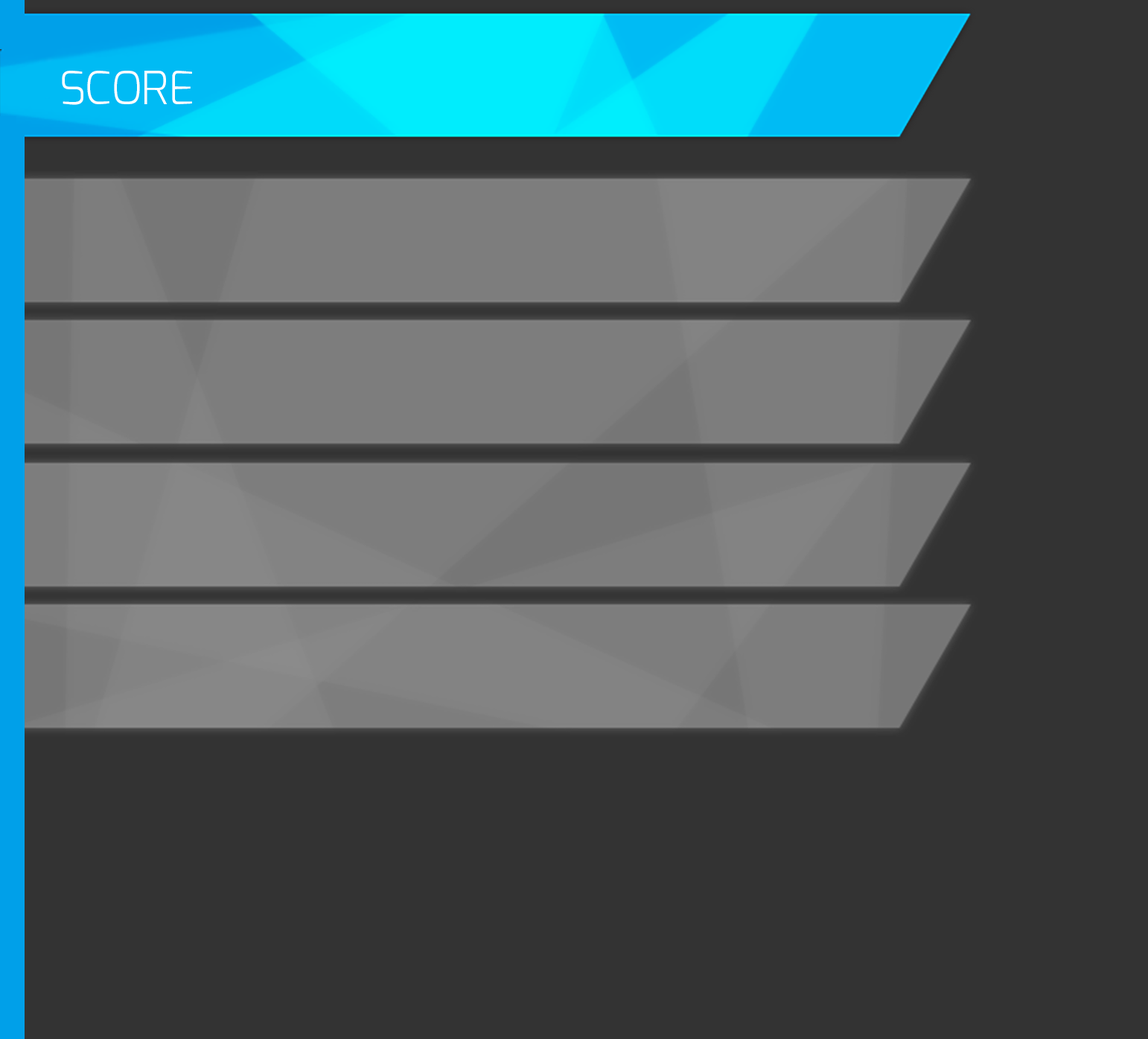
<style>
.page{position:relative;width:1148px;height:1039px;background:#333333}
.page>*{position:absolute;margin:0}
.t1{font:45.4px "Exo-Light";color:#ffffff}
</style>
<div class="page">
<p class="t1" style="left:62px;top:71px;width:130px;height:34px">SCORE</p>
</div>
